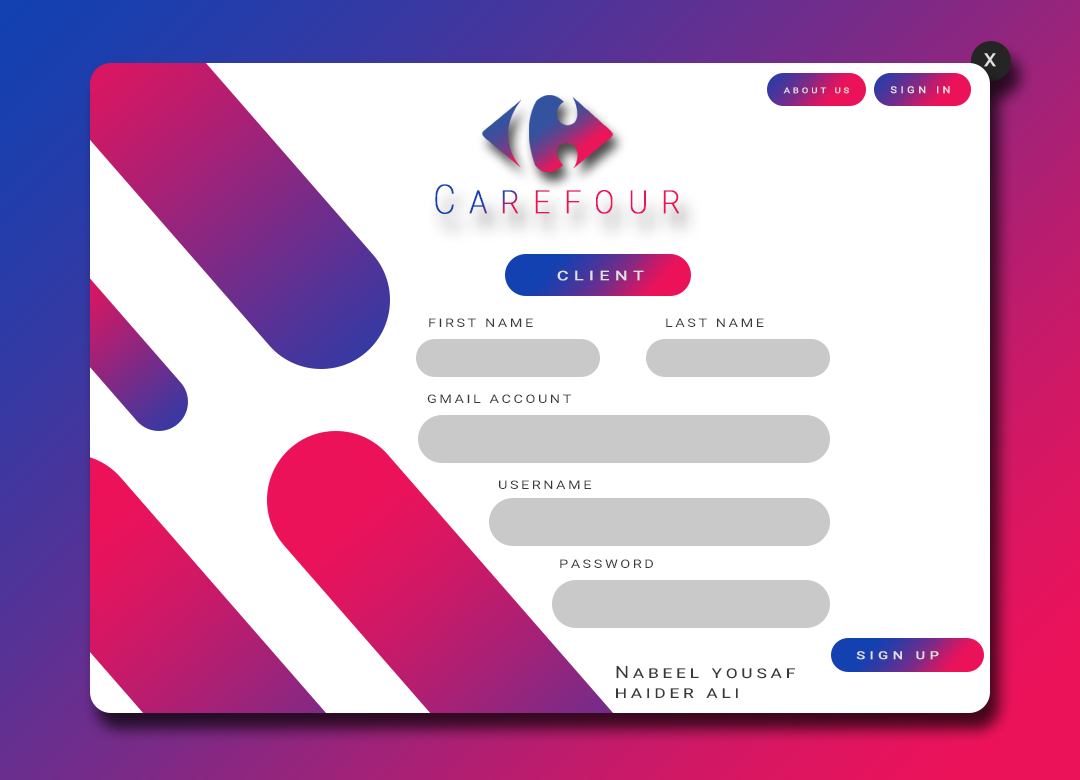
<style>
.page{position:relative;width:1080px;height:780px;background:#ffffff}
.page>*{position:absolute;margin:0}
.t1{font:18px "Roboto-Regular";letter-spacing:0.3em;color:#e0e0e0;font-weight:bold;scale:1.05 1}
.t2{font:7.9px "Roboto-Regular";letter-spacing:0.3em;color:#e0e0e0;text-transform:uppercase;font-weight:bold;scale:1.19 1}
.t3{font:9.4px "Roboto-Regular";letter-spacing:0.3em;color:#e0e0e0;text-transform:uppercase;font-weight:bold;scale:1.17 1}
.t4{font:40px "Roboto-Thin";letter-spacing:0.38em;font-variant:small-caps;font-weight:bold;scale:0.85 1}
.t5{font:13px "Roboto-Regular";letter-spacing:0.3em;color:#e0e0e0;text-transform:uppercase;font-weight:bold;scale:1.34 1}
.t6{font:12px "Roboto-Regular";letter-spacing:0.18em;color:#383838;text-transform:uppercase;scale:1.2 1}
.t7{font:10.7px "Roboto-Regular";letter-spacing:0.3em;color:#e0e0e0;text-transform:uppercase;font-weight:bold;scale:1.34 1}
.t8{font:16.9px "Roboto-Regular";letter-spacing:0.18em;color:#383838;font-variant:small-caps;scale:1.2 1}
</style>
<div class="page">
<p class="t1" style="left:984px;top:53px;width:12px;height:14px">X</p>
<p class="t2" style="left:783px;top:87px;width:66px;height:7px">About Us</p>
<p class="t3" style="left:890px;top:86px;width:60px;height:8px">Sign in</p>
<p class="t4" style="left:435px;top:184px;width:244px;height:30px">Carefour</p>
<p class="t5" style="left:557px;top:270px;width:87px;height:11px">Client</p>
<p class="t6" style="left:429px;top:318px;width:104px;height:9px">First Name</p>
<p class="t6" style="left:666px;top:318px;width:98px;height:9px">Last name</p>
<p class="t6" style="left:427px;top:394px;width:144px;height:9px">gmail account</p>
<p class="t6" style="left:499px;top:480px;width:92px;height:9px">Username</p>
<p class="t6" style="left:560px;top:559px;width:93px;height:9px">Password</p>
<p class="t7" style="left:856px;top:651px;width:83px;height:9px">sign up</p>
<p class="t8" style="left:616px;top:666px;width:179px;height:32px">Nabeel yousaf<br>haider ali</p>
</div>
